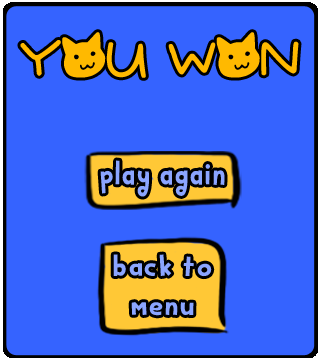
<style>
.page{position:relative;width:320px;height:360px;background:#3563ff}
.page>*{position:absolute;margin:0}
.t1{font:55px "QuietMeows";color:#ffb900}
.t2{font:37px "BakeappleDEMO-Regular";color:#8aa5ff;scale:0.86 1}
.t3{font:32.4px "BakeappleDEMO-Regular";color:#8ba5ff;scale:1.05 1}
</style>
<div class="page">
<p class="t1" style="left:20px;top:32px;width:279px;height:46px">you won</p>
<p class="t2" style="left:100px;top:160px;width:125px;height:37px">play again</p>
<p class="t3" style="left:113px;top:254px;width:99px;height:62px;text-align:center">back to <br>menu</p>
</div>
